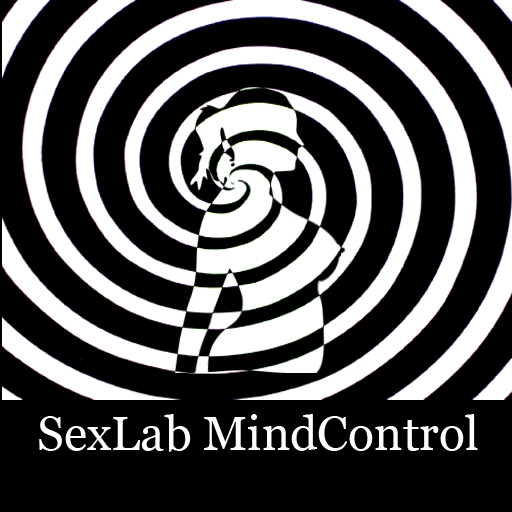
<style>
.page{position:relative;width:512px;height:512px;background:#000000}
.page>*{position:absolute;margin:0}
.t1{font:48px "Georgia";color:#ffffff}
</style>
<div class="page">
<p class="t1" style="left:39px;top:414px;width:439px;height:38px">SexLab MindControl</p>
</div>
